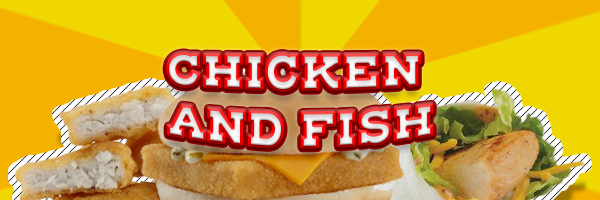
<style>
.page{position:relative;width:600px;height:200px}
.page>*{position:absolute;margin:0}
.t1{font:41.7px "HendersonSlabBasicBlack"}
</style>
<div class="page">
<p class="t1" style="left:167px;top:53px;width:265px;height:95px;text-align:center">CHICKEN <br>AND FISH</p>
</div>
